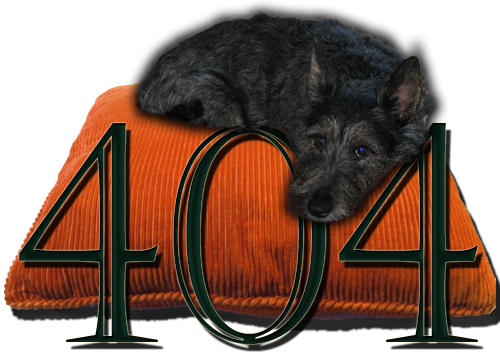
<style>
.page{position:relative;width:500px;height:356px;background:#ffffff}
.page>*{position:absolute;margin:0}
.t1{font:303.1px "Castellar";color:#0e2f22;scale:0.82 1}
</style>
<div class="page">
<p class="t1" style="left:19px;top:123px;width:459px;height:221px">404</p>
</div>
